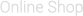
<style>
.page{position:relative;width:83px;height:16px;background:#ffffff}
.page>*{position:absolute;margin:0}
.t1{font:16px "Roboto-Light";color:#dcdcdc}
</style>
<div class="page">
<p class="t1" style="left:0px;top:0px;width:83px;height:16px">Online Shop</p>
</div>
